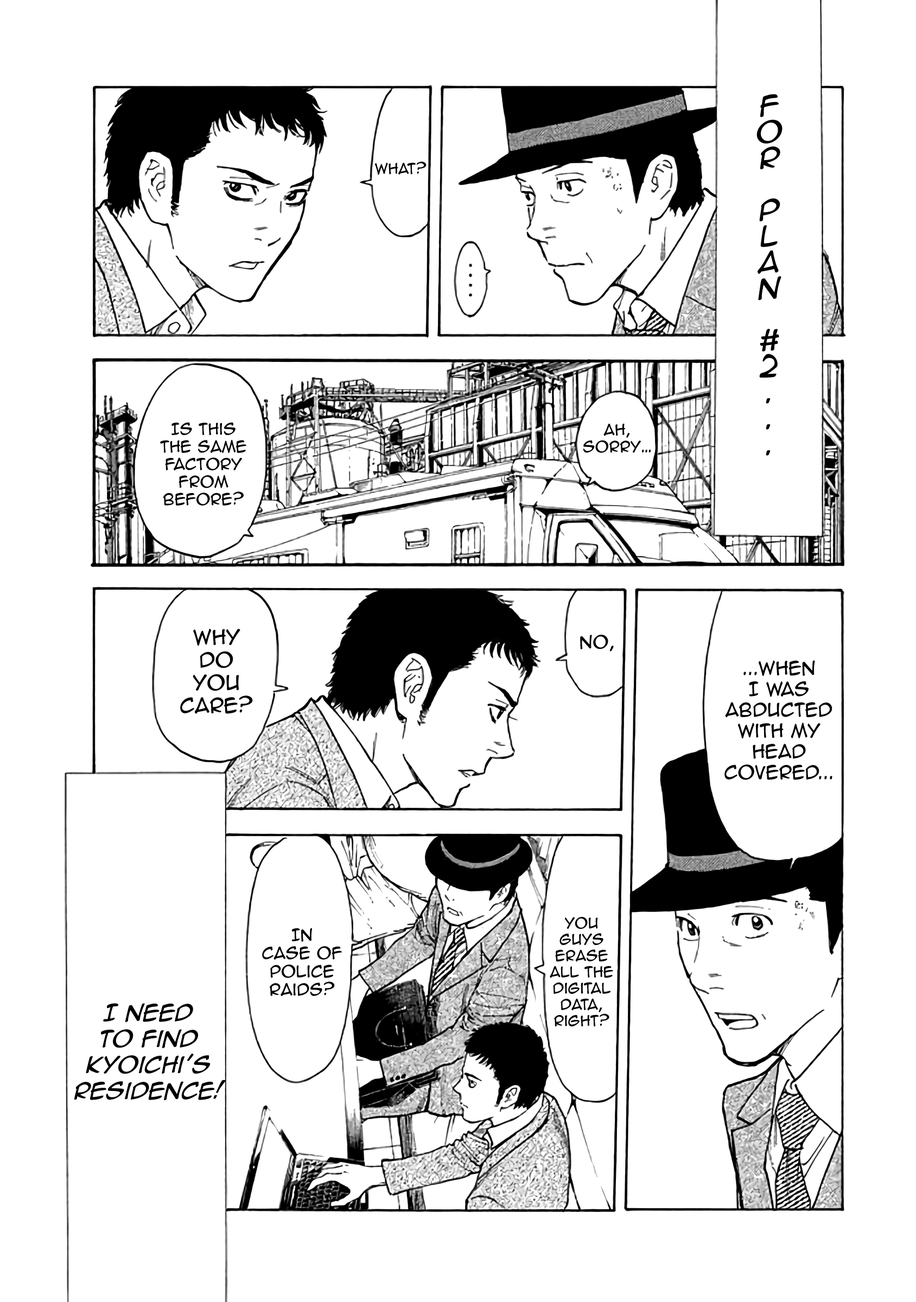
<style>
.page{position:relative;width:916px;height:1302px;background:#ffffff}
.page>*{position:absolute;margin:0}
.t1{font:27.1px/26px "AnimeAce2.0BB";color:#000000;font-style:italic}
.t2{font:13.6px "AnimeAce2.0BB";color:#000000}
.t3{font:14.6px "AnimeAce2.0BB";color:#000000}
.t4{font:14.1px "AnimeAce2.0BB";color:#000000}
.t5{font:19px "AnimeAce2.0BB";color:#000000}
.t6{font:16.3px "AnimeAce2.0BB";color:#000000}
.t7{font:17.4px "AnimeAce2.0BB";color:#000000}
.t8{font:15.2px "AnimeAce2.0BB";color:#000000}
.t9{font:21.7px "AnimeAce2.0BB-Italic";color:#000000}
</style>
<div class="page">
<p class="t1" style="left:756px;top:94px;width:26px;height:362px;text-align:center">F<br>o<br>r<br><br>P<br>l<br>a<br>n<br><br>#<br>2<br>.<br>.<br>.</p>
<p class="t2" style="left:375px;top:162px;width:51px;height:13px">what?</p>
<p class="t3" style="left:160px;top:422px;width:86px;height:84px;text-align:center">Is this<br>the same<br>factory<br>from<br>before?</p>
<p class="t4" style="left:583px;top:424px;width:68px;height:29px;text-align:center">Ah,<br>sorry…</p>
<p class="t5" style="left:180px;top:629px;width:73px;height:85px;text-align:center">Why<br>do<br>you<br>care?</p>
<p class="t6" style="left:580px;top:635px;width:34px;height:17px">No,</p>
<p class="t7" style="left:724px;top:660px;width:108px;height:120px;text-align:center">...When<br>I was<br>abducted<br>with my<br>head<br>covered...</p>
<p class="t2" style="left:550px;top:917px;width:63px;height:109px;text-align:center">You<br>guys<br>erase<br>all the<br>digital<br>data,<br>right?</p>
<p class="t8" style="left:262px;top:928px;width:80px;height:69px;text-align:center">In<br>case of<br>police<br>raids?</p>
<p class="t9" style="left:74px;top:1003px;width:152px;height:97px;text-align:center">I need<br>to find<br>Kyoichi’s<br>residence!</p>
</div>
